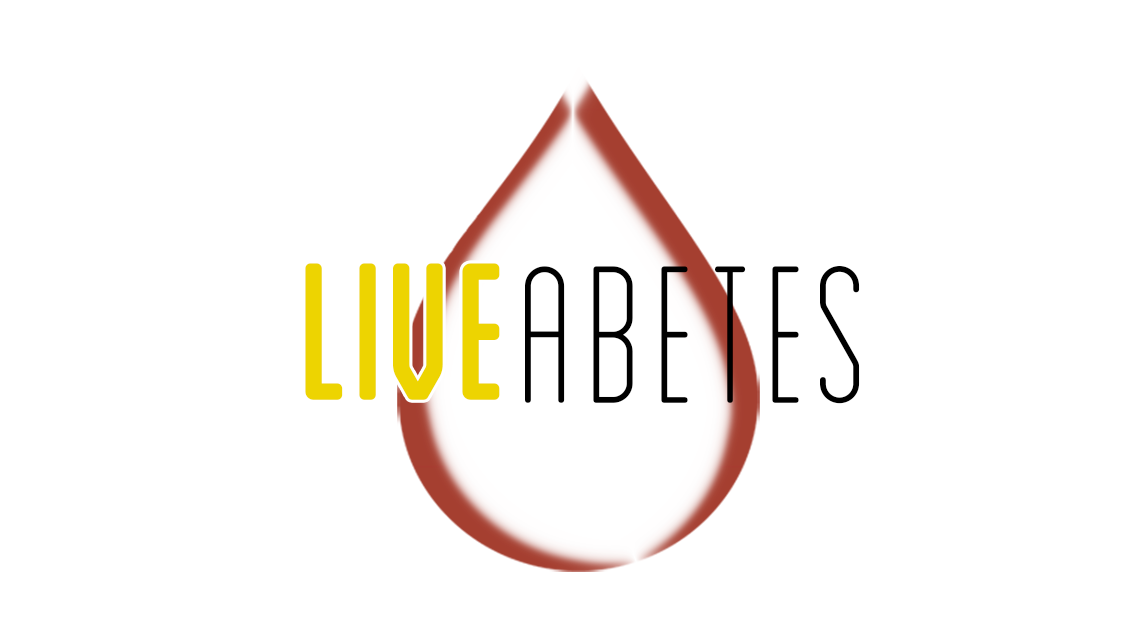
<style>
.page{position:relative;width:1137px;height:640px;background:#ffffff}
.page>*{position:absolute;margin:0}
.t1{font:200.2px "Blanch-CondensedInline";color:#edd401;font-weight:bold}
.t2{font:200.2px "Blanch-CondensedLight";color:#000000;font-weight:bold}
</style>
<div class="page">
<p class="t1" style="left:305px;top:263px;width:195px;height:137px">LIVE</p>
<p class="t2" style="left:525px;top:266px;width:335px;height:138px">abetes</p>
</div>
